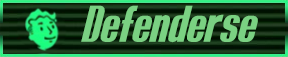
<style>
.page{position:relative;width:288px;height:57px}
.page>*{position:absolute;margin:0}
.t1{font:48px "SoleSurvivor";letter-spacing:0.01em;color:#7ad182}
</style>
<div class="page">
<p class="t1" style="left:81px;top:5px;width:177px;height:38px">Defenderse</p>
</div>
